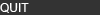
<style>
.page{position:relative;width:100px;height:15px;background:#333333}
.page>*{position:absolute;margin:0}
.t1{font:12px "HalfLife";color:#ffffff}
</style>
<div class="page">
<p class="t1" style="left:0px;top:3px;width:29px;height:10px">QUIT</p>
</div>
